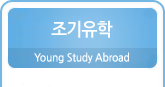
<style>
.page{position:relative;width:165px;height:87px;background:#ffffff}
.page>*{position:absolute;margin:0}
.t1{font:18px "NanumGothicBold";letter-spacing:-0.05em;color:#ffffff;scale:0.95 1}
.t2{font:11px "NanumGothicBold";letter-spacing:-0.025em;color:#ffffff;scale:0.95 1}
</style>
<div class="page">
<p class="t1" style="left:51px;top:20px;width:62px;height:18px">조기유학</p>
<p class="t2" style="left:34px;top:52px;width:95px;height:12px">Young Study Abroad</p>
</div>
